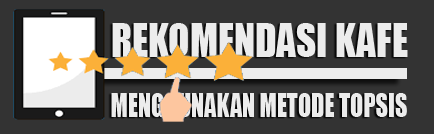
<style>
.page{position:relative;width:434px;height:134px;background:#333333}
.page>*{position:absolute;margin:0}
.t1{font:42.6px "Impact";color:#ececec;scale:0.92 1}
.t2{font:29.8px "Impact";color:#ececec;scale:0.81 1}
</style>
<div class="page">
<p class="t1" style="left:112px;top:23px;width:296px;height:34px">REKOMENDASI KAFE</p>
<p class="t2" style="left:111px;top:93px;width:296px;height:24px">MENGGUNAKAN METODE TOPSIS</p>
</div>
